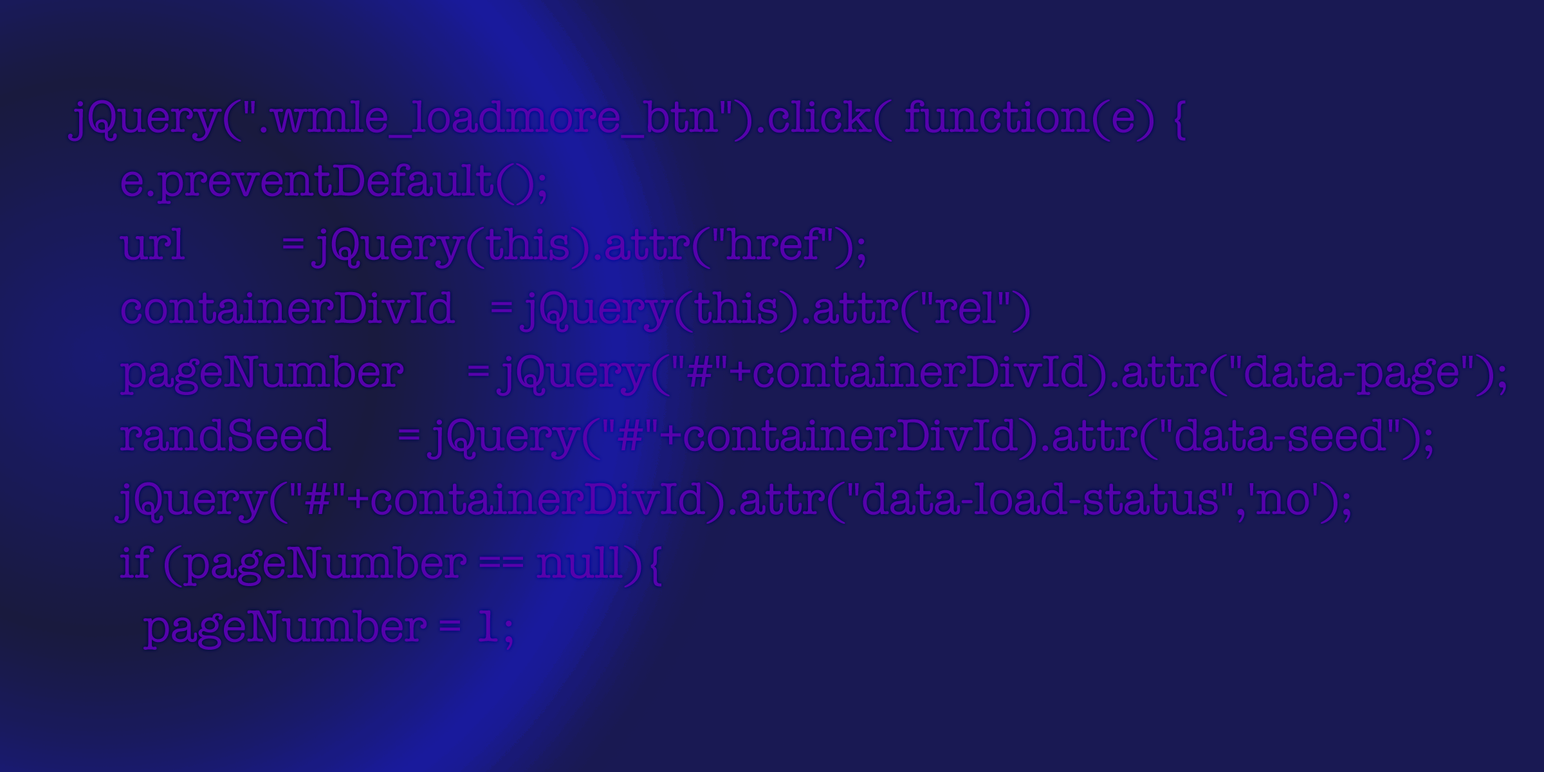
<style>
.page{position:relative;width:1544px;height:772px;background:#191953}
.page>*{position:absolute;margin:0}
.t1{font:46.3px/63.7px "AmericanTypewriter";color:#5602ab}
</style>
<div class="page">
<p class="t1" style="left:68px;top:99px;width:1438px;height:552px">jQuery(".wmle_loadmore_btn").click( function(e) {<br>  e.preventDefault();<br>  url     = jQuery(this).attr("href");<br>  containerDivId   = jQuery(this).attr("rel")<br>  pageNumber    = jQuery("#"+containerDivId).attr("data-page");<br>  randSeed    = jQuery("#"+containerDivId).attr("data-seed");<br>  jQuery("#"+containerDivId).attr("data-load-status",'no');<br>  if (pageNumber == null){<br>    pageNumber = 1;</p>
</div>
